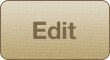
<style>
.page{position:relative;width:110px;height:60px}
.page>*{position:absolute;margin:0}
.t1{font:24px "HelveticaNeue-Bold";color:#7c684c}
</style>
<div class="page">
<p class="t1" style="left:33px;top:21px;width:43px;height:19px">Edit</p>
</div>
